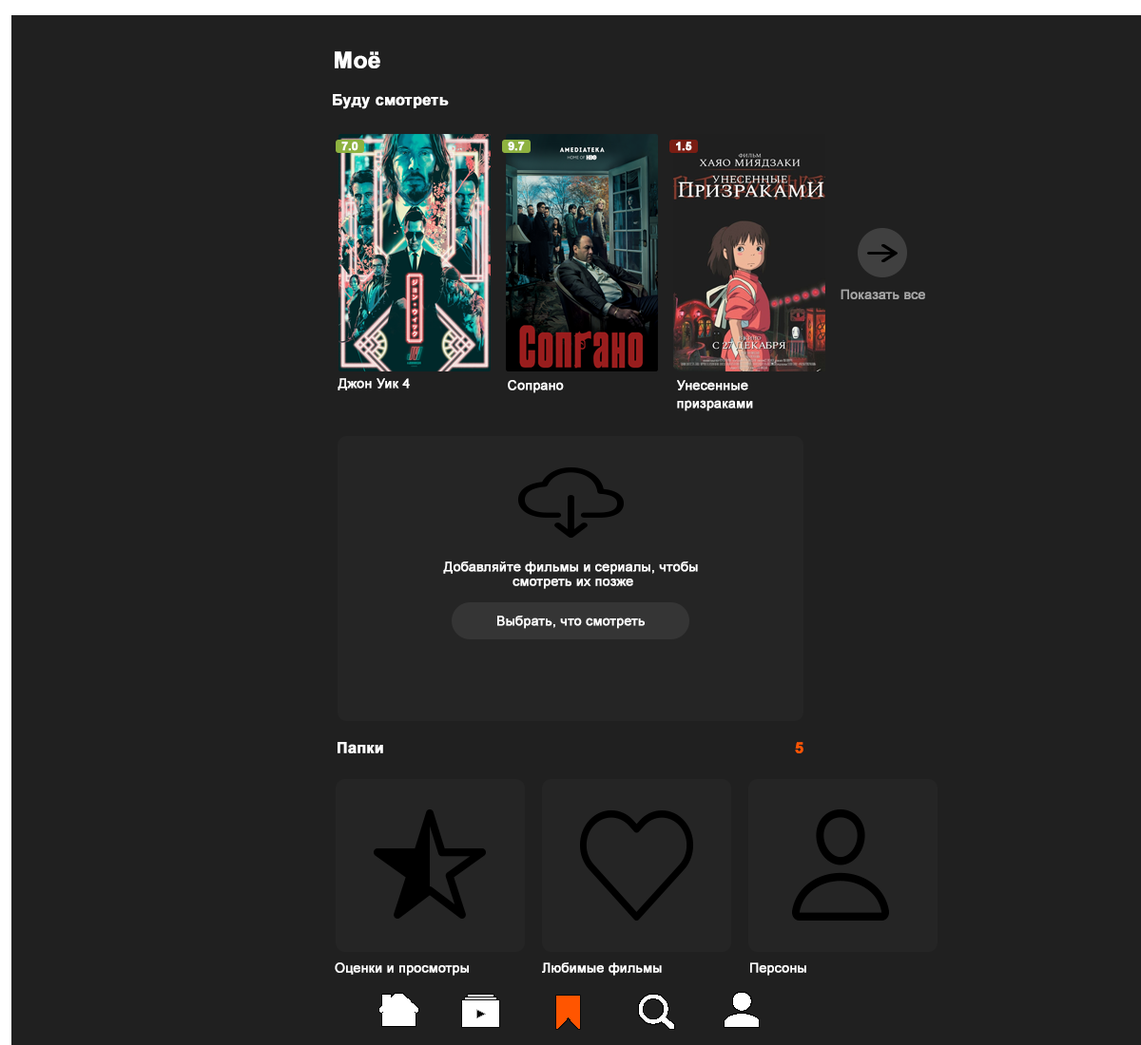
<style>
.page{position:relative;width:1141px;height:1045px;background:#202020}
.page>*{position:absolute;margin:0}
.t1{font:22.8px "Arial-BoldMT";color:#ffffff;font-weight:bold}
.t2{font:15.2px "Arial-BoldMT";color:#ffffff;font-weight:bold}
.t3{font:11.4px "Arial-BoldMT";color:#ffffff;font-weight:bold}
.t4{font:13.3px "ArialMT";color:#a6a6a6;font-weight:bold}
.t5{font:13.3px "ArialMT";color:#ffffff;font-weight:bold}
.t6{font:13.3px/3.6px "ArialMT";color:#ffffff;font-weight:bold}
.t7{font:15.2px "Arial-BoldMT";color:#ff5500;font-weight:bold}
</style>
<div class="page">
<p class="t1" style="left:335px;top:51px;width:45px;height:17px">Моё</p>
<p class="t2" style="left:333px;top:94px;width:116px;height:15px">Буду смотреть</p>
<p class="t3" style="left:341px;top:142px;width:17px;height:9px">7.0</p>
<p class="t3" style="left:508px;top:142px;width:17px;height:9px">9.7</p>
<p class="t3" style="left:676px;top:142px;width:16px;height:9px">1.5</p>
<p class="t4" style="left:840px;top:289px;width:85px;height:10px">Показать все</p>
<p class="t5" style="left:337px;top:378px;width:73px;height:13px">Джон Уик 4</p>
<p class="t5" style="left:508px;top:380px;width:56px;height:13px">Сопрано</p>
<p class="t6" style="left:677px;top:380px;width:76px;height:32px">Унесенные <br><br><br><br><br>призраками</p>
<p class="t6" style="left:443px;top:562px;width:255px;height:27px;text-align:justify">Добавляйте фильмы и сериалы, чтобы<br><br><br><br> смотреть их позже</p>
<p class="t5" style="left:497px;top:616px;width:147px;height:13px">Выбрать, что смотреть</p>
<p class="t2" style="left:337px;top:742px;width:46px;height:12px">Папки</p>
<p class="t7" style="left:795px;top:742px;width:8px;height:12px">5</p>
<p class="t5" style="left:335px;top:963px;width:134px;height:13px">Оценки и просмотры</p>
<p class="t5" style="left:542px;top:963px;width:120px;height:13px">Любимые фильмы</p>
<p class="t5" style="left:750px;top:963px;width:56px;height:13px">Персоны</p>
</div>
